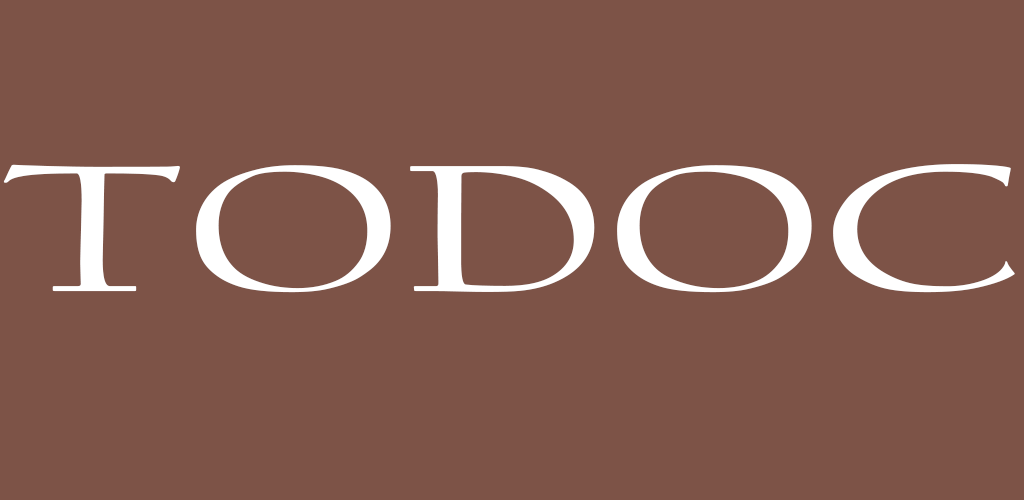
<style>
.page{position:relative;width:1024px;height:500px;background:#7d5347}
.page>*{position:absolute;margin:0}
.t1{font:187.5px "CalifornianFB-Reg";color:#ffffff;scale:1.6 1}
</style>
<div class="page">
<p class="t1" style="left:3px;top:164px;width:1012px;height:129px">TODOC</p>
</div>
